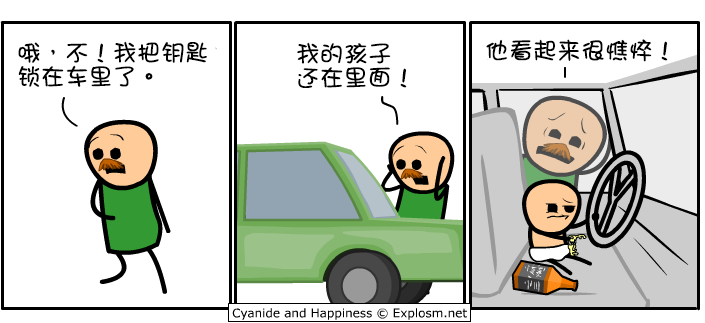
<style>
.page{position:relative;width:705px;height:323px;background:#ffffff}
.page>*{position:absolute;margin:0}
.t1{font:24px/24px "DFGirl";color:#000000}
.t2{font:24px "DFGirl";color:#000000}
</style>
<div class="page">
<p class="t1" style="left:18px;top:41px;width:189px;height:46px">哦，不！我把钥匙<br>锁在车里了。</p>
<p class="t2" style="left:486px;top:39px;width:182px;height:23px">他看起来很憔悴！</p>
<p class="t1" style="left:297px;top:42px;width:110px;height:46px">我的孩子<br>还在里面！</p>
</div>
